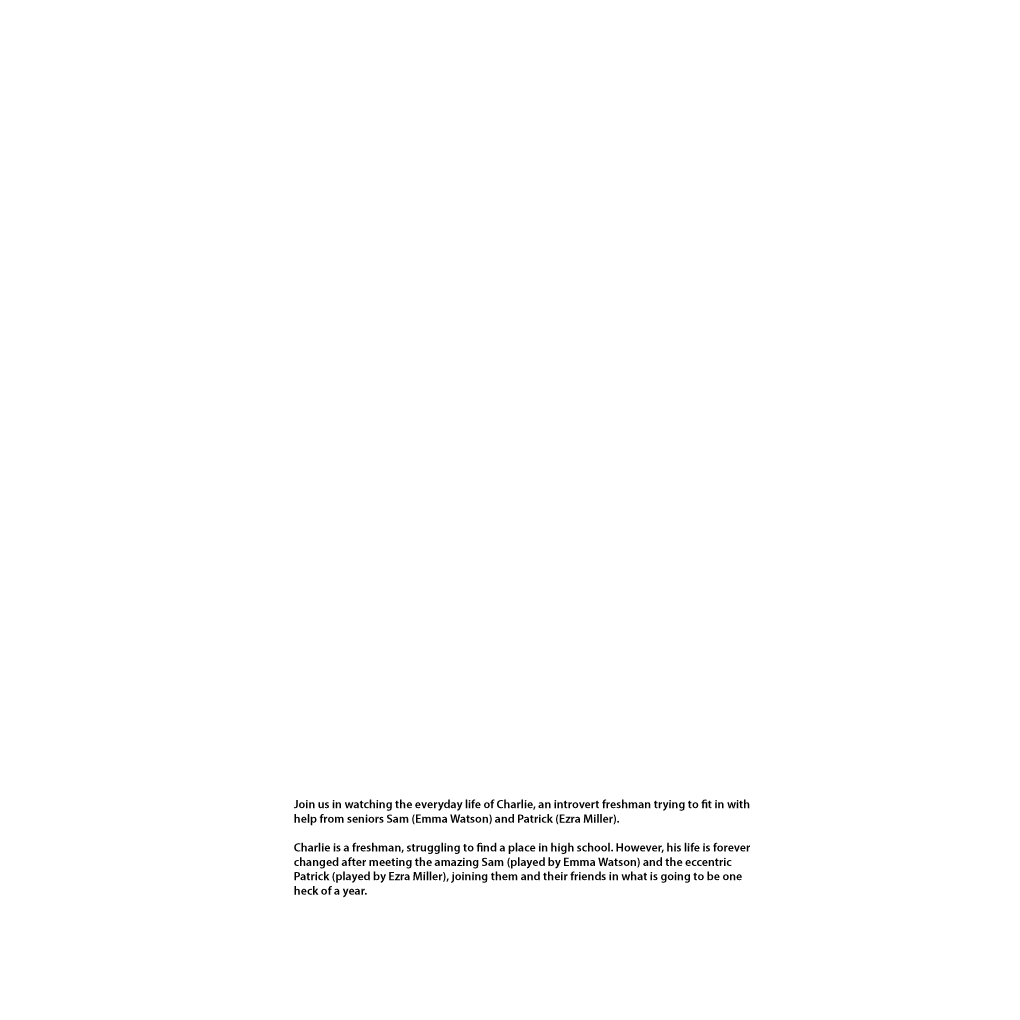
<style>
.page{position:relative;width:1020px;height:1020px;background:#ffffff}
.page>*{position:absolute;margin:0}
.t1{font:12px "MyriadPro-Semibold";color:#000000}
</style>
<div class="page">
<p class="t1" style="left:293px;top:799px;width:457px;height:99px">Join us in watching the everyday life of Charlie, an introvert freshman trying to fit in with help from seniors Sam (Emma Watson) and Patrick (Ezra Miller).<br><br>Charlie is a freshman, struggling to find a place in high school. However, his life is forever changed after meeting the amazing Sam (played by Emma Watson) and the eccentric Patrick (played by Ezra Miller), joining them and their friends in what is going to be one heck of a year.</p>
</div>
